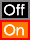
<style>
.page{position:relative;width:30px;height:40px;background:#ff7800}
.page>*{position:absolute;margin:0}
.t1{font:14.3px "CenturyGothic";color:#ffffff}
</style>
<div class="page">
<p class="t1" style="left:4px;top:4px;width:21px;height:12px">Off</p>
<p class="t1" style="left:4px;top:4px;width:21px;height:12px">Off</p>
<p class="t1" style="left:4px;top:24px;width:20px;height:12px">On</p>
<p class="t1" style="left:4px;top:24px;width:20px;height:12px">On</p>
</div>
